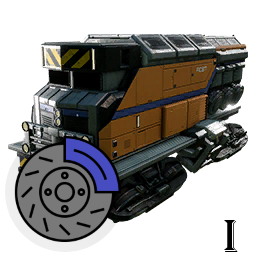
<style>
.page{position:relative;width:256px;height:256px;background:#ffffff}
.page>*{position:absolute;margin:0}
.t1{font:48px "Algerian";letter-spacing:-0.025em;color:#000000}
</style>
<div class="page">
<p class="t1" style="left:224px;top:220px;width:14px;height:32px">I</p>
</div>
